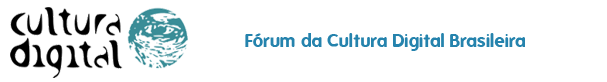
<style>
.page{position:relative;width:607px;height:82px;background:#ffffff}
.page>*{position:absolute;margin:0}
.t1{font:18px "Folks-Bold";color:#2583ad}
</style>
<div class="page">
<p class="t1" style="left:245px;top:33px;width:280px;height:18px">Fórum da Cultura Digital Brasileira</p>
</div>
